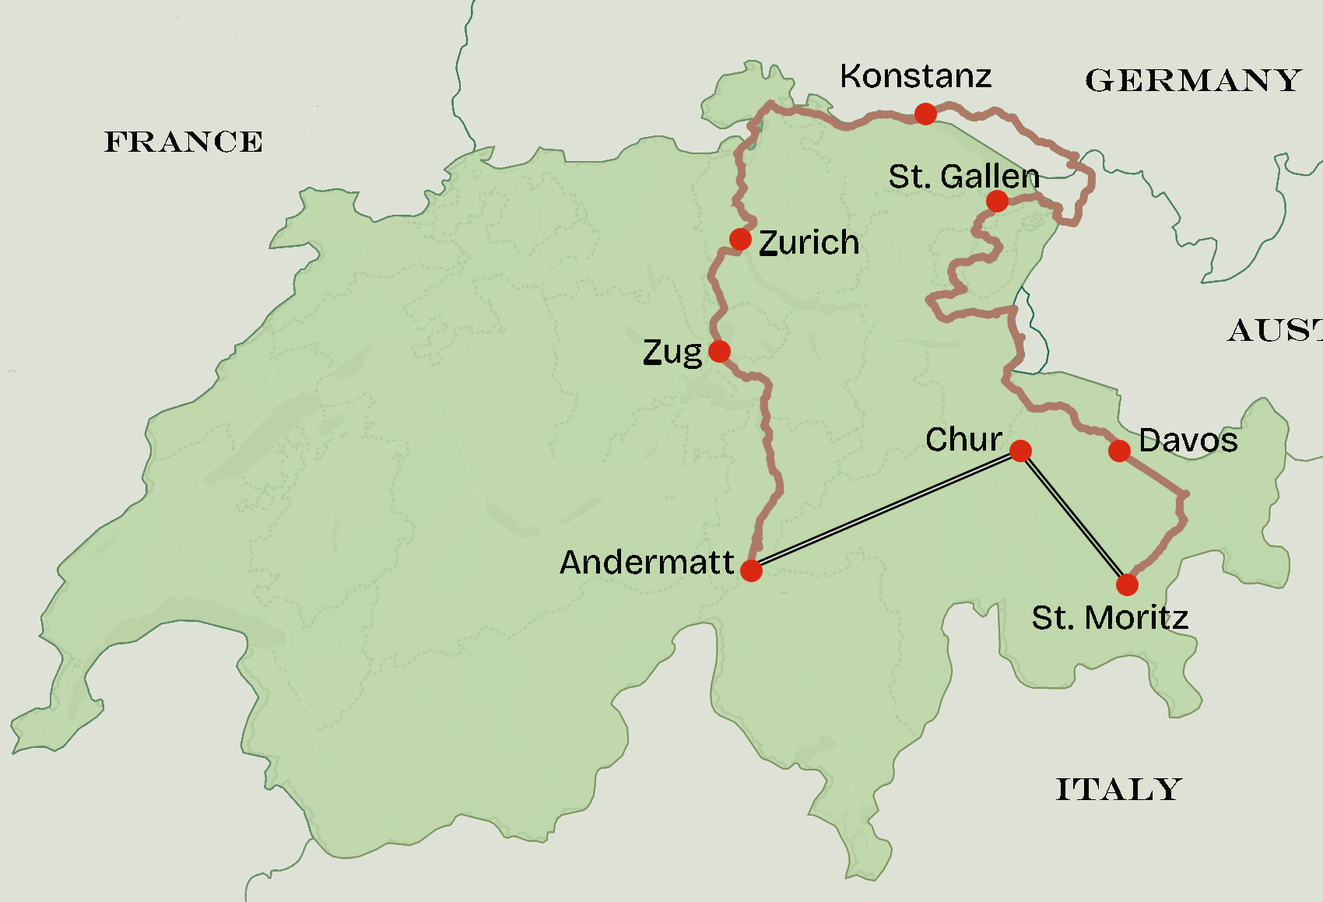
<style>
.page{position:relative;width:1323px;height:902px;background:#dee2d6}
.page>*{position:absolute;margin:0}
.t1{font:35px "BricolageGrotesque-Regular";color:#050505}
.t2{font:31.9px "Engry";color:#050505}
.t3{font:29.8px "Engry";color:#050505}
</style>
<div class="page">
<p class="t1" style="left:841px;top:64px;width:150px;height:24px">Konstanz</p>
<p class="t2" style="left:1085px;top:68px;width:218px;height:24px">Germany</p>
<p class="t3" style="left:103px;top:131px;width:159px;height:21px">France</p>
<p class="t1" style="left:889px;top:163px;width:150px;height:25px">St. Gallen</p>
<p class="t1" style="left:759px;top:228px;width:99px;height:28px">Zurich</p>
<p class="t1" style="left:643px;top:339px;width:59px;height:30px">Zug</p>
<p class="t1" style="left:926px;top:426px;width:77px;height:25px">Chur</p>
<p class="t1" style="left:1140px;top:428px;width:97px;height:24px">Davos</p>
<p class="t1" style="left:559px;top:548px;width:175px;height:26px">Andermatt</p>
<p class="t1" style="left:1032px;top:603px;width:156px;height:26px">St. Moritz</p>
<p class="t2" style="left:1056px;top:777px;width:127px;height:23px">Italy</p>
</div>
